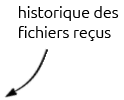
<style>
.page{position:relative;width:124px;height:100px;background:#ffffff}
.page>*{position:absolute;margin:0}
.t1{font:16px "Ubuntu-Light";color:#000000}
</style>
<div class="page">
<p class="t1" style="left:19px;top:6px;width:100px;height:35px">historique des <br>fichiers reçus</p>
</div>
